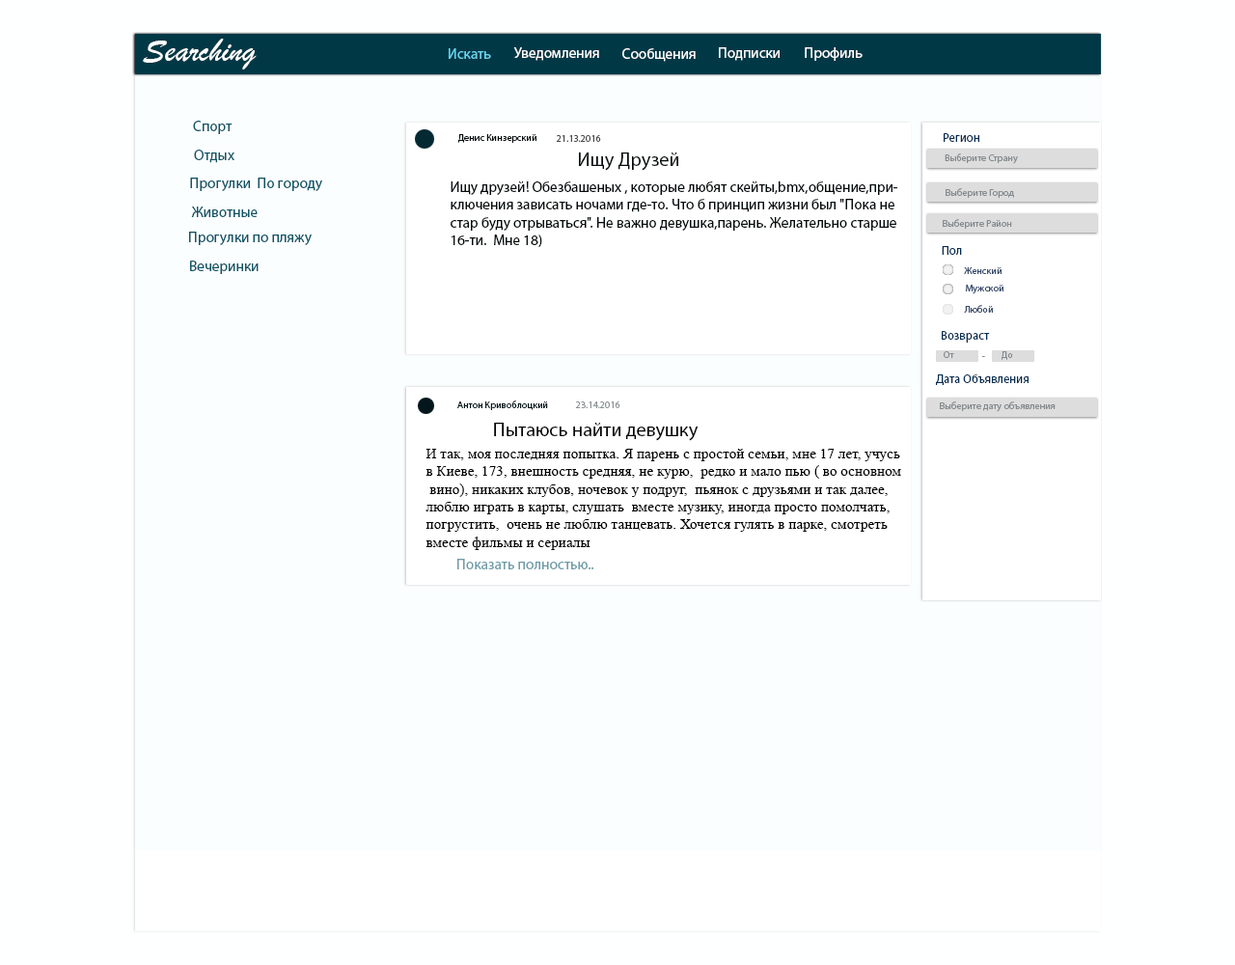
<style>
.page{position:relative;width:1235px;height:965px;background:#fbfeff}
.page>*{position:absolute;margin:0}
.t1{font:34.3px "BrushScriptMT";color:#ffffff}
.t2{font:14.7px "MyriadPro-Regular";color:#66d6f2}
.t3{font:14.7px "MyriadPro-Regular";color:#ffffff}
.t4{font:14.7px "MyriadPro-Regular";color:#105567}
.t5{font:9.8px "MyriadPro-Regular";color:#040b0d}
.t6{font:9.8px "MyriadPro-Regular";color:#4b4c4c}
.t7{font:12.3px "MyriadPro-Regular";color:#042c50}
.t8{font:14.7px "MyriadPro-Regular";color:#105566}
.t9{font:19.6px "MyriadPro-Regular";color:#040b0d}
.t10{font:9.8px "MyriadPro-Regular";color:#868b8f}
.t11{font:14.7px "MyriadPro-Regular";color:#040b0d}
.t12{font:14.7px "MyriadPro-Regular";color:#105465}
.t13{font:9.8px "MyriadPro-Regular";color:#384b6b}
.t14{font:9.8px "MyriadPro-Regular";color:#02161b}
.t15{font:9.8px "MyriadPro-Regular";color:#8c9496}
.t16{font:19.6px "MyriadPro-Regular";color:#000000}
.t17{font:14.7px "TimesNewRomanPSMT";color:#000000}
.t18{font:14.7px "MyriadPro-Regular";color:#6e9ba7}
</style>
<div class="page">
<p class="t1" style="left:143px;top:39px;width:114px;height:30px">Searching</p>
<p class="t2" style="left:449px;top:48px;width:42px;height:11px">Искать</p>
<p class="t3" style="left:513px;top:47px;width:86px;height:14px">Уведомления</p>
<p class="t3" style="left:623px;top:48px;width:73px;height:14px">Сообщения</p>
<p class="t3" style="left:719px;top:47px;width:61px;height:14px">Подписки</p>
<p class="t3" style="left:805px;top:47px;width:58px;height:14px">Профиль</p>
<p class="t4" style="left:193px;top:121px;width:40px;height:13px">Спорт</p>
<p class="t5" style="left:458px;top:134px;width:79px;height:9px">Денис Кинзерский</p>
<p class="t6" style="left:556px;top:135px;width:45px;height:7px">21.13.2016</p>
<p class="t7" style="left:944px;top:133px;width:36px;height:9px">Регион</p>
<p class="t8" style="left:194px;top:150px;width:41px;height:13px">Отдых</p>
<p class="t9" style="left:579px;top:152px;width:100px;height:19px">Ищу Друзей</p>
<p class="t10" style="left:945px;top:153px;width:73px;height:11px">Выберите Страну</p>
<p class="t8" style="left:190px;top:178px;width:132px;height:13px">Прогулки  По городу</p>
<p class="t11" style="left:451px;top:181px;width:447px;height:66px">Ищу друзей! Обезбашеных , которые любят скейты,bmx,общение,при-<br>ключения зависать ночами где-то. Что б принцип жизни был "Пока не <br>стар буду отрываться". Не важно девушка,парень. Желательно старше <br>16-ти.  Мне 18)</p>
<p class="t10" style="left:946px;top:188px;width:68px;height:10px">Выберите Город</p>
<p class="t12" style="left:191px;top:207px;width:67px;height:10px">Животные</p>
<p class="t10" style="left:943px;top:219px;width:69px;height:10px">Выберите Район</p>
<p class="t8" style="left:189px;top:232px;width:123px;height:13px">Прогулки по пляжу</p>
<p class="t7" style="left:942px;top:246px;width:20px;height:9px">Пол</p>
<p class="t8" style="left:190px;top:261px;width:69px;height:13px">Вечеринки</p>
<p class="t13" style="left:964px;top:267px;width:38px;height:7px">Женский</p>
<p class="t13" style="left:966px;top:285px;width:38px;height:9px">Мужской</p>
<p class="t13" style="left:964px;top:305px;width:29px;height:8px">Любой</p>
<p class="t7" style="left:942px;top:331px;width:48px;height:12px">Возвраст</p>
<p class="t10" style="left:944px;top:351px;width:11px;height:7px">От</p>
<p class="t10" style="left:1002px;top:351px;width:11px;height:9px">До</p>
<p class="t10" style="left:983px;top:356px;width:2px;height:1px">-</p>
<p class="t7" style="left:936px;top:374px;width:93px;height:11px">Дата Объявления</p>
<p class="t14" style="left:457px;top:401px;width:91px;height:9px">Антон Кривоблоцкий</p>
<p class="t15" style="left:575px;top:402px;width:46px;height:6px">23.14.2016</p>
<p class="t10" style="left:940px;top:402px;width:116px;height:10px">Выберите дату объявления</p>
<p class="t16" style="left:494px;top:423px;width:205px;height:18px">Пытаюсь найти девушку</p>
<p class="t17" style="left:426px;top:449px;width:475px;height:101px">И так, моя последняя попытка. Я парень с простой семьи, мне 17 лет, учусь <br>в Киеве, 173, внешность средняя, не курю,  редко и мало пью ( во основном<br> вино), никаких клубов, ночевок у подруг,  пьянок с друзьями и так далее, <br>люблю играть в карты, слушать  вместе музику, иногда просто помолчать, <br>погрустить,  очень не люблю танцевать. Хочется гулять в парке, смотреть <br>вместе фильмы и сериалы</p>
<p class="t18" style="left:457px;top:559px;width:138px;height:10px">Показать полностью..</p>
</div>
